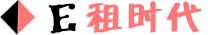
<style>
.page{position:relative;width:208px;height:35px;background:#ffffff}
.page>*{position:absolute;margin:0}
.t1{font:35.1px "Ftiebihei";letter-spacing:0.05em;color:#fc7878;font-weight:bold;scale:1.05 1}
</style>
<div class="page">
<p class="t1" style="left:85px;top:0px;width:120px;height:37px">租时代</p>
</div>
